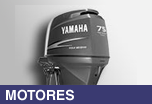
<style>
.page{position:relative;width:152px;height:104px}
.page>*{position:absolute;margin:0}
.t1{font:14px "Helvetica-Bold";color:#ffffff}
</style>
<div class="page">
<p class="t1" style="left:6px;top:89px;width:68px;height:12px">MOTORES</p>
</div>
